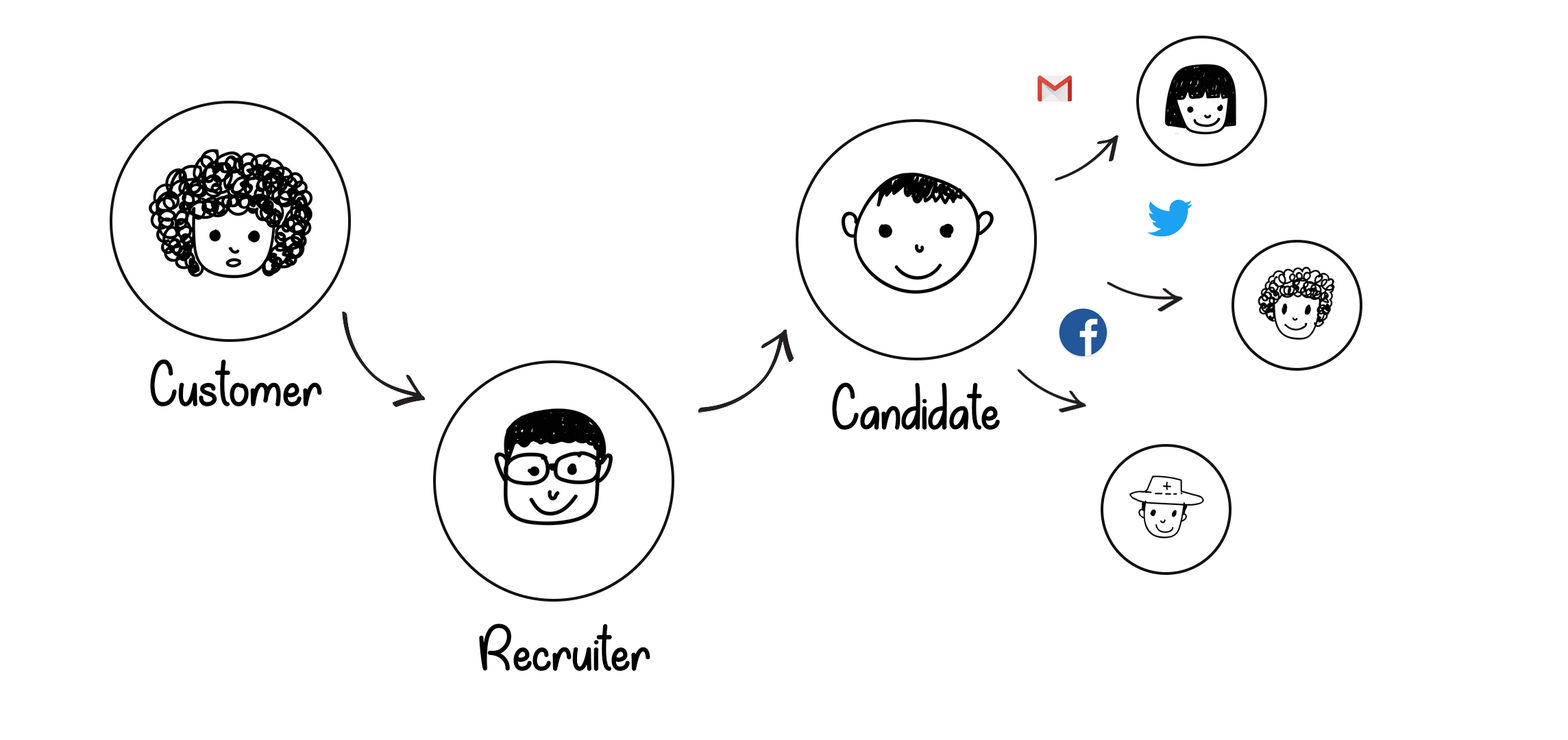
<style>
.page{position:relative;width:1568px;height:740px;background:#ffffff}
.page>*{position:absolute;margin:0}
.t1{font:71.9px "MyHappyEnding-Regular";color:#000000}
</style>
<div class="page">
<p class="t1" style="left:150px;top:359px;width:172px;height:47px">Customer</p>
<p class="t1" style="left:832px;top:382px;width:168px;height:48px">Candidate</p>
<p class="t1" style="left:479px;top:624px;width:171px;height:47px">Recruiter</p>
</div>
